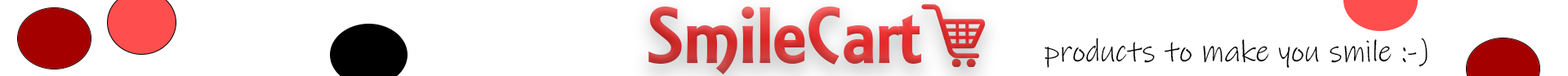
<style>
.page{position:relative;width:1568px;height:76px;background:#ffffff}
.page>*{position:absolute;margin:0}
.t1{font:86px "ARESSENCE";color:#d83636}
.t2{font:30.6px "InkFree";color:#000000}
</style>
<div class="page">
<p class="t1" style="left:648px;top:7px;width:273px;height:67px">SmileCart</p>
<p class="t2" style="left:1045px;top:38px;width:383px;height:30px">products to make you smile :-)</p>
</div>
